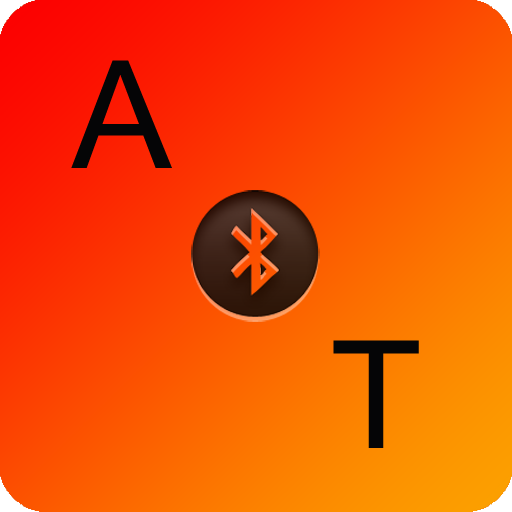
<style>
.page{position:relative;width:512px;height:512px}
.page>*{position:absolute;margin:0}
.t1{font:150px "MicrosoftSansSerif";color:#060606}
</style>
<div class="page">
<p class="t1" style="left:71px;top:60px;width:101px;height:108px">A</p>
<p class="t1" style="left:333px;top:340px;width:86px;height:108px">T</p>
</div>
